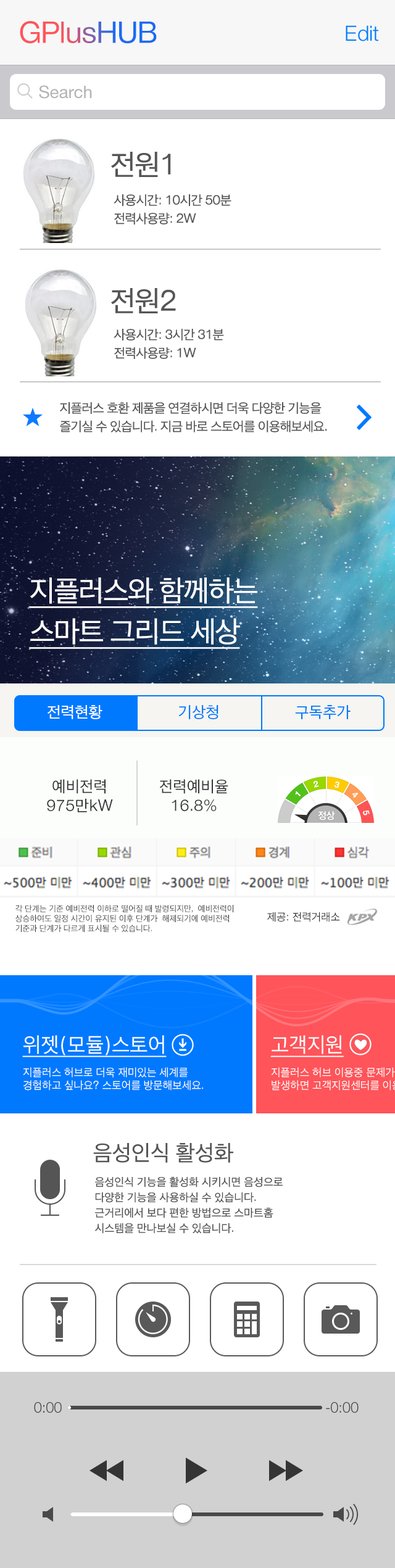
<style>
.page{position:relative;width:395px;height:1568px;background:#ffffff}
.page>*{position:absolute;margin:0}
.t1{font:29.6px "AppleSDGothicNeo-Regular";letter-spacing:-0.035em}
.t2{font:21px "HelveticaNeueLTStd-Lt";color:#007aff}
.t3{font:17.3px "HelveticaNeueLTStd-Roman";color:#b3b3b3}
.t4{font:29.6px "AppleSDGothicNeo-Regular";letter-spacing:-0.035em;color:#555555}
.t5{font:13.3px/18.4px "AppleSDGothicNeo-Regular";letter-spacing:-0.035em;color:#555555}
.t6{font:29.6px/40.9px "AppleSDGothicNeo-Regular";letter-spacing:-0.035em;color:#ffffff;text-decoration:underline}
.t7{font:16px "AppleSDGothicNeo-Regular";color:#ffffff}
.t8{font:16px "AppleSDGothicNeo-Regular";color:#007aff}
.t9{font:16px "AppleSDGothicNeo-Regular";color:#353535}
.t10{font:8.4px "AppleSDGothicNeo-Regular";color:#353535}
.t11{font:11px "AppleSDGothicNeo-Regular";color:#353535}
.t12{font:21px "AppleSDGothicNeo-Regular";color:#fcfefc;text-decoration:underline}
.t13{font:11.1px "AppleSDGothicNeo-Regular";color:#fcfefc}
.t14{font:22.2px "AppleSDGothicNeo-Regular";color:#555555}
.t15{font:11.3px/15.4px "AppleSDGothicNeo-Regular";color:#555555}
.t16{font:14.8px "HelveticaNeue-Light";letter-spacing:-0.01em;color:#464646}
</style>
<div class="page">
<p class="t1" style="left:20px;top:21px;width:137px;height:23px">GPlusHUB</p>
<p class="t2" style="left:345px;top:25px;width:33px;height:16px">Edit</p>
<p class="t3" style="left:39px;top:85px;width:53px;height:14px">Search</p>
<p class="t4" style="left:111px;top:152px;width:60px;height:25px">전원1</p>
<p class="t5" style="left:113px;top:194px;width:118px;height:31px;text-align:justify">사용시간: 10시간 50분<br>전력사용량: 2W</p>
<p class="t4" style="left:111px;top:288px;width:65px;height:25px">전원2</p>
<p class="t5" style="left:113px;top:329px;width:111px;height:30px;text-align:justify">사용시간: 3시간 31분<br>전력사용량: 1W</p>
<p class="t5" style="left:60px;top:402px;width:267px;height:30px;text-align:justify">지플러스 호환 제품을 연결하시면 더욱 다양한 기능을<br>즐기실 수 있습니다. 지금 바로 스토어를 이용해보세요.</p>
<p class="t6" style="left:29px;top:577px;width:229px;height:72px;text-align:justify">지플러스와 함께하는<br>스마트 그리드 세상</p>
<p class="t7" style="left:47px;top:705px;width:55px;height:14px">전력현황</p>
<p class="t8" style="left:178px;top:705px;width:40px;height:14px">기상청</p>
<p class="t8" style="left:295px;top:705px;width:55px;height:14px">구독추가</p>
<p class="t9" style="left:47px;top:779px;width:66px;height:33px;text-align:center">예비전력<br>975만kW</p>
<p class="t9" style="left:159px;top:779px;width:69px;height:33px;text-align:center">전력예비율<br>16.8%</p>
<p class="t10" style="left:15px;top:905px;width:218px;height:27px">각 단계는 기준 예비전력 이하로 떨어질 때 발령되지만,  예비전력이<br>상승하여도 일정 시간이 유지된 이후 단계가  해제되기에 예비전력 <br>기준과 단계가 다르게 표시될 수 있습니다.</p>
<p class="t11" style="left:267px;top:912px;width:73px;height:10px">제공: 전력거래소</p>
<p class="t12" style="left:22px;top:1035px;width:145px;height:22px">위젯(모듈)스토어</p>
<p class="t12" style="left:270px;top:1035px;width:74px;height:22px">고객지원</p>
<p class="t13" style="left:23px;top:1067px;width:180px;height:24px">지플러스 허브로 더욱 재미있는 세계를<br>경험하고 싶나요? 스토어를 방문해보세요.</p>
<p class="t14" style="left:93px;top:1143px;width:140px;height:20px">음성인식 활성화</p>
<p class="t15" style="left:95px;top:1177px;width:188px;height:57px;text-align:justify">음성인식 기능을 활성화 시키시면 음성으로 <br>다양한 기능을 사용하실 수 있습니다. <br>근거리에서 보다 편한 방법으로 스마트홈 <br>시스템을 만나보실 수 있습니다.</p>
<p class="t16" style="left:34px;top:1402px;width:28px;height:11px">0:00</p>
<p class="t16" style="left:326px;top:1402px;width:32px;height:11px">-0:00</p>
</div>
